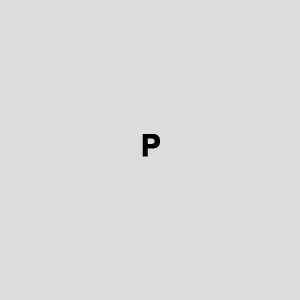
<style>
.page{position:relative;width:300px;height:300px;background:#dcdcdc}
.page>*{position:absolute;margin:0}
.t1{font:30px "Arial-BoldMT";color:#000000;font-weight:bold}
</style>
<div class="page">
<p class="t1" style="left:142px;top:134px;width:18px;height:23px">P</p>
</div>
